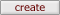
<style>
.page{position:relative;width:60px;height:15px;background:#e9e8e8}
.page>*{position:absolute;margin:0}
.t1{font:10px "Verdana";letter-spacing:-0.02em;color:#660000}
</style>
<div class="page">
<p class="t1" style="left:15px;top:4px;width:30px;height:7px">create</p>
</div>
